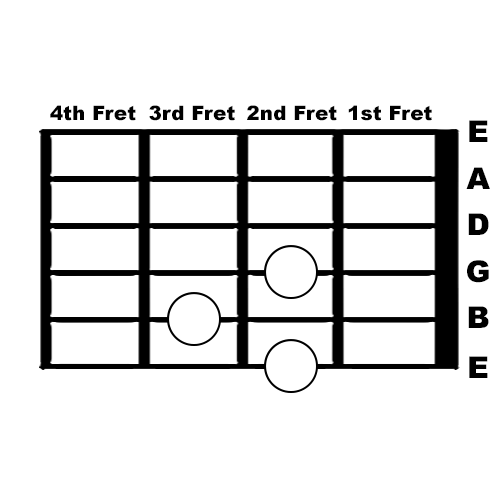
<style>
.page{position:relative;width:500px;height:500px;background:#ffffff}
.page>*{position:absolute;margin:0}
.t1{font:20px "Arial-Black";color:#000000}
.t2{font:30px "Arial-Black";color:#000000}
</style>
<div class="page">
<p class="t1" style="left:50px;top:105px;width:86px;height:16px">4th Fret</p>
<p class="t1" style="left:149px;top:105px;width:86px;height:16px">3rd Fret</p>
<p class="t1" style="left:247px;top:105px;width:90px;height:16px">2nd Fret</p>
<p class="t1" style="left:348px;top:105px;width:84px;height:16px">1st Fret</p>
<p class="t2" style="left:469px;top:120px;width:19px;height:22px">E</p>
<p class="t2" style="left:466px;top:167px;width:24px;height:22px">A</p>
<p class="t2" style="left:468px;top:213px;width:21px;height:22px">D</p>
<p class="t2" style="left:467px;top:260px;width:22px;height:23px">G</p>
<p class="t2" style="left:468px;top:306px;width:21px;height:22px">B</p>
<p class="t2" style="left:469px;top:356px;width:19px;height:22px">E</p>
</div>
